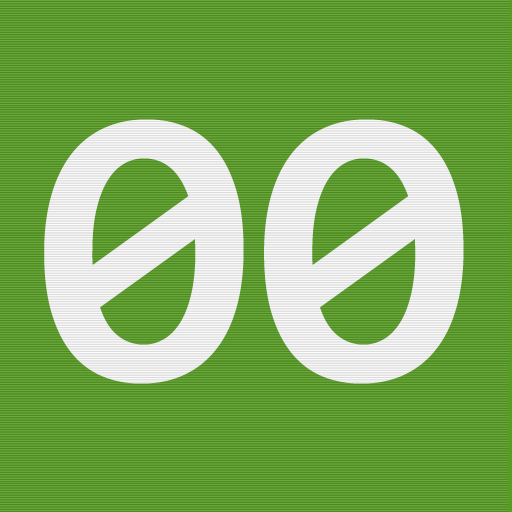
<style>
.page{position:relative;width:512px;height:512px}
.page>*{position:absolute;margin:0}
.t1{font:400px "Consolas-Bold";color:#ffffff}
</style>
<div class="page">
<p class="t1" style="left:44px;top:119px;width:420px;height:265px">00</p>
</div>
